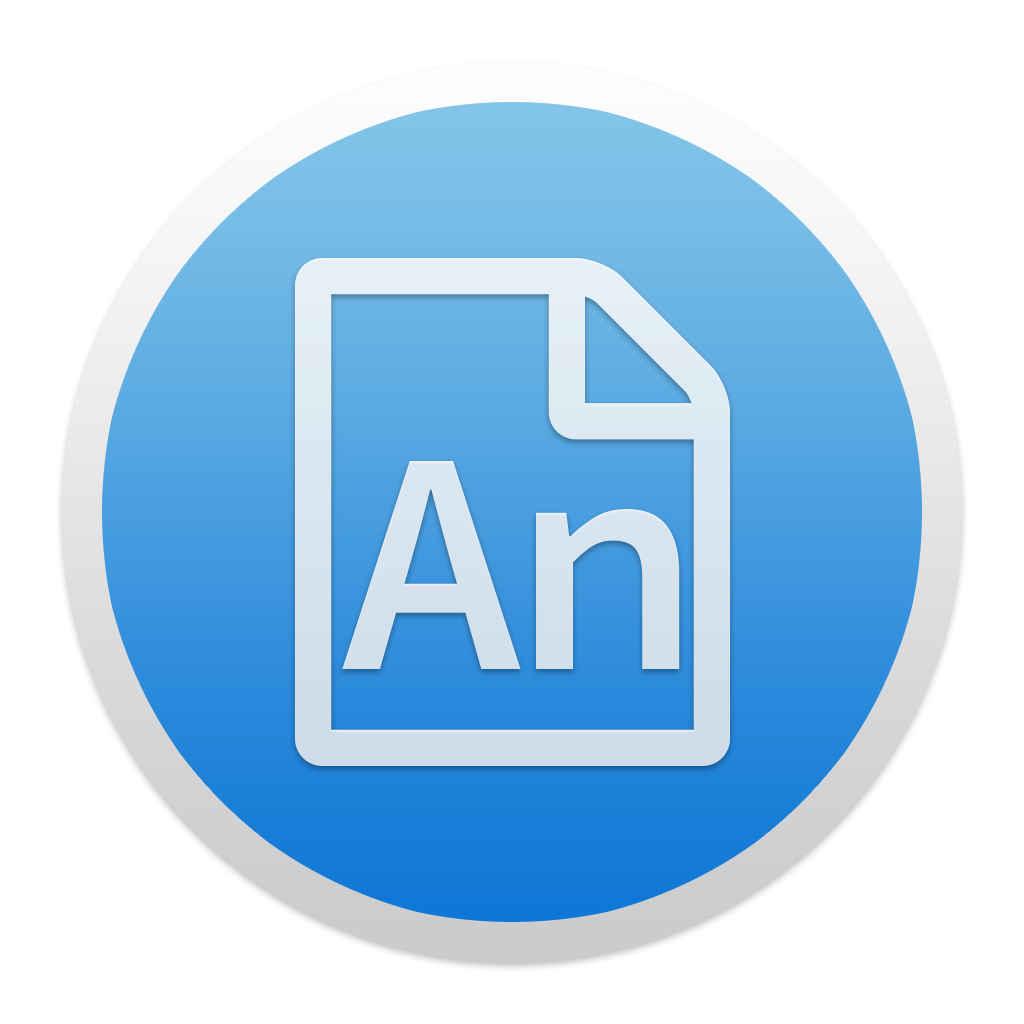
<style>
.page{position:relative;width:1024px;height:1024px;background:#ffffff}
.page>*{position:absolute;margin:0}
.t1{font:318px "SourceCodePro-Semibold";letter-spacing:-0.05em;color:#d5e3ed}
</style>
<div class="page">
<p class="t1" style="left:342px;top:461px;width:338px;height:208px">An</p>
</div>
